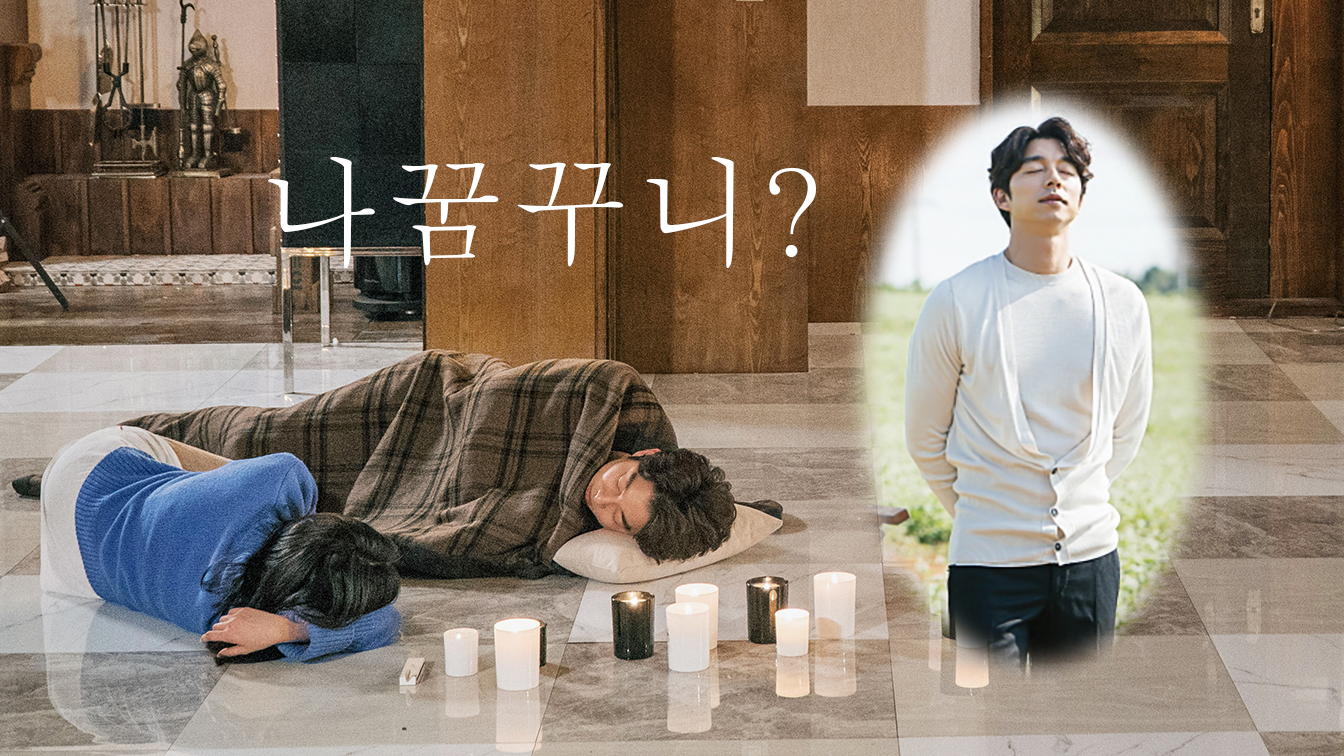
<style>
.page{position:relative;width:1344px;height:756px}
.page>*{position:absolute;margin:0}
.t1{font:118.6px "Batang";letter-spacing:0.06em;color:#ffffff}
</style>
<div class="page">
<p class="t1" style="left:268px;top:157px;width:548px;height:111px">나꿈꾸니?</p>
</div>
